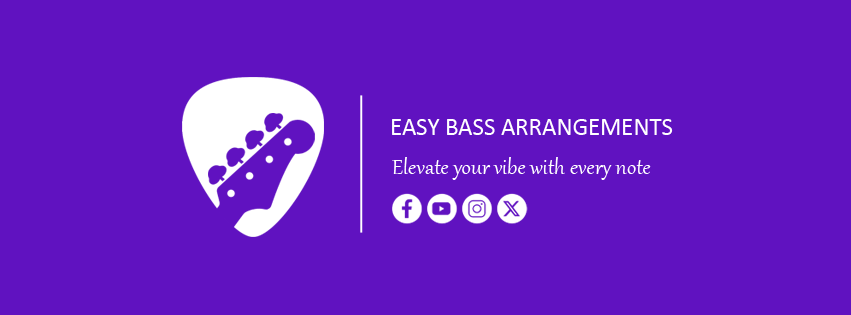
<style>
.page{position:relative;width:851px;height:315px;background:#6012c0}
.page>*{position:absolute;margin:0}
.t1{font:24.8px "Calibri";color:#ffffff}
.t2{font:26.4px "Gabriola";color:#ffffff}
</style>
<div class="page">
<p class="t1" style="left:392px;top:119px;width:281px;height:16px">EASY BASS ARRANGEMENTS</p>
<p class="t2" style="left:392px;top:157px;width:259px;height:23px">Elevate your vibe with every note</p>
</div>
